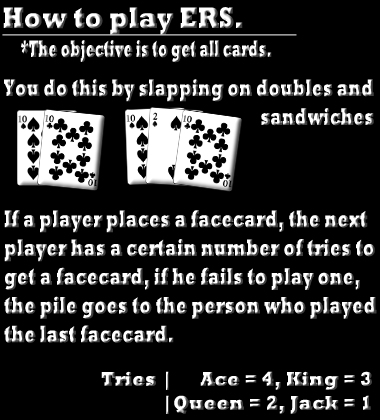
<style>
.page{position:relative;width:380px;height:420px;background:#000000}
.page>*{position:absolute;margin:0}
.t1{font:30px "Rockwell-ExtraBold";scale:0.82 1}
.t2{font:24px "Rockwell-ExtraBold";scale:0.54 1}
.t3{font:24px "Rockwell-ExtraBold";scale:0.66 1}
.t4{font:24px "Rockwell-ExtraBold";scale:0.68 1}
.t5{font:19.9px "Rockwell-ExtraBold";scale:0.93 1}
</style>
<div class="page">
<p class="t1" style="left:3px;top:7px;width:240px;height:28px">How to play ERS.</p>
<p class="t2" style="left:21px;top:40px;width:251px;height:23px">*The objective is to get all cards.</p>
<p class="t3" style="left:4px;top:79px;width:370px;height:47px">You do this by slapping on doubles and<br>                                                                 sandwiches</p>
<p class="t4" style="left:4px;top:210px;width:373px;height:133px">If a player places a facecard, the next<br>player has a certain number of tries to<br>get a facecard, if he fails to play one,<br>the pile goes to the person who played <br>the last facecard.</p>
<p class="t5" style="left:101px;top:371px;width:271px;height:43px;text-align:right">Tries |      Ace = 4, King = 3<br>  |Queen = 2, Jack = 1</p>
</div>
